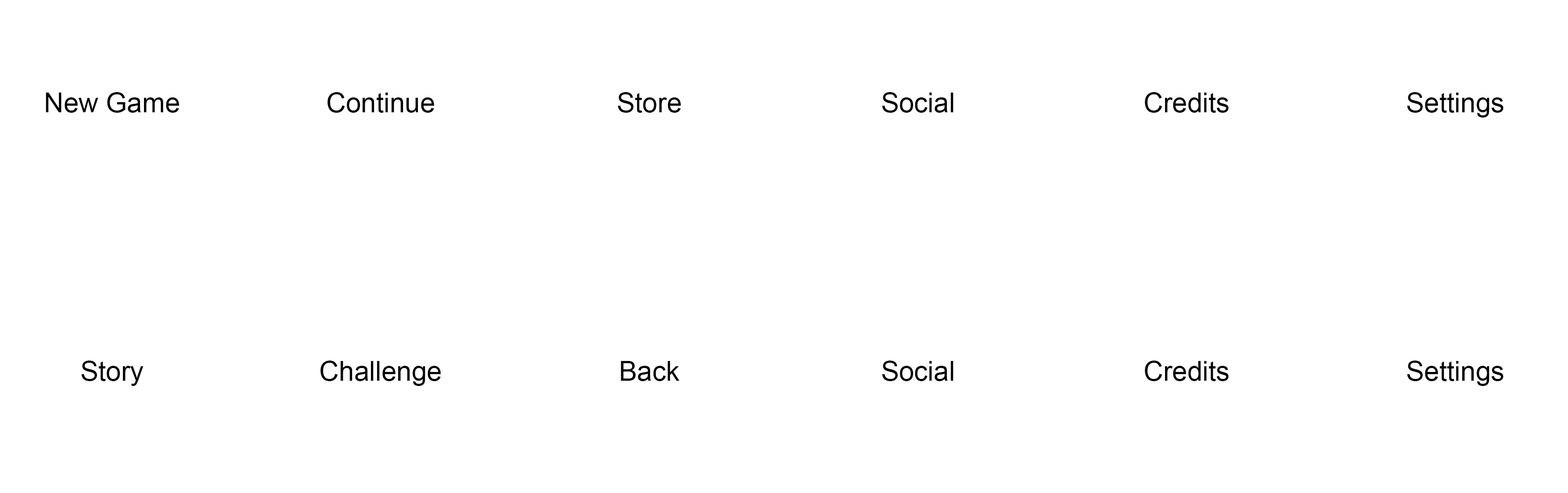
<style>
.page{position:relative;width:1568px;height:493px;background:#ffffff}
.page>*{position:absolute;margin:0}
.t1{font:27.2px "ArialMT";color:#000000}
</style>
<div class="page">
<p class="t1" style="left:46px;top:92px;width:133px;height:21px">New Game</p>
<p class="t1" style="left:327px;top:92px;width:107px;height:21px">Continue</p>
<p class="t1" style="left:618px;top:92px;width:63px;height:21px">Store</p>
<p class="t1" style="left:882px;top:92px;width:71px;height:21px">Social</p>
<p class="t1" style="left:1145px;top:92px;width:84px;height:21px">Credits</p>
<p class="t1" style="left:1407px;top:92px;width:96px;height:26px">Settings</p>
<p class="t1" style="left:81px;top:361px;width:63px;height:25px">Story</p>
<p class="t1" style="left:320px;top:361px;width:121px;height:25px">Challenge</p>
<p class="t1" style="left:621px;top:361px;width:59px;height:20px">Back</p>
<p class="t1" style="left:882px;top:361px;width:71px;height:20px">Social</p>
<p class="t1" style="left:1145px;top:361px;width:84px;height:20px">Credits</p>
<p class="t1" style="left:1407px;top:361px;width:96px;height:25px">Settings</p>
</div>
